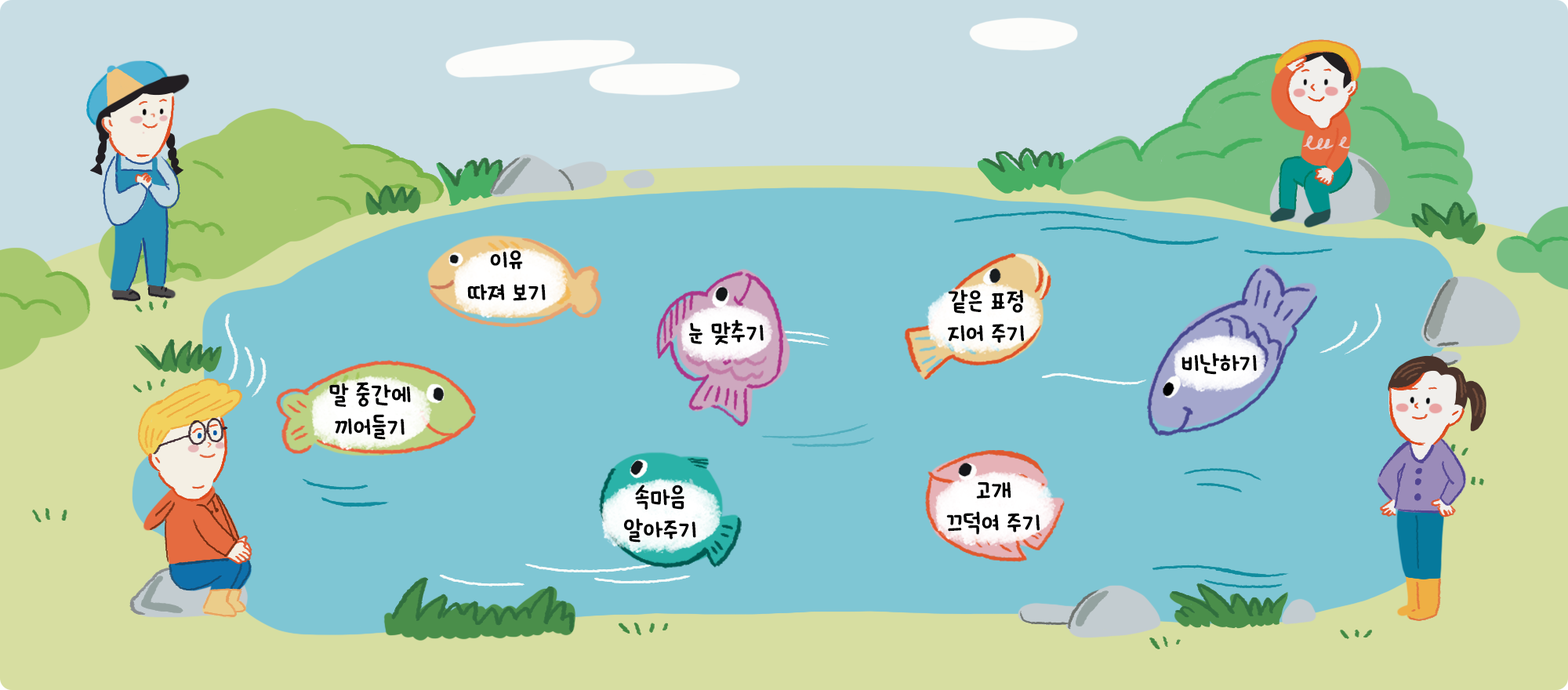
<style>
.page{position:relative;width:1568px;height:690px;background:#7fc6d4}
.page>*{position:absolute;margin:0}
.t1{font:27px "HakgyoansimNadeuriOTF-B";color:#000000}
</style>
<div class="page">
<p class="t1" style="left:467px;top:250px;width:79px;height:51px;text-align:center">이유<br>따져 보기</p>
<p class="t1" style="left:948px;top:289px;width:76px;height:54px;text-align:center">같은 표정<br>지어 주기</p>
<p class="t1" style="left:689px;top:320px;width:75px;height:25px">눈 맞추기</p>
<p class="t1" style="left:1181px;top:353px;width:76px;height:22px">비난하기</p>
<p class="t1" style="left:329px;top:382px;width:82px;height:58px;text-align:center">말 중간에<br>끼어들기</p>
<p class="t1" style="left:623px;top:485px;width:73px;height:58px;text-align:center">속마음<br>알아주기</p>
<p class="t1" style="left:946px;top:481px;width:94px;height:54px;text-align:center">고개<br>끄덕여 주기</p>
</div>
